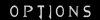
<style>
.page{position:relative;width:100px;height:20px;background:#000000}
.page>*{position:absolute;margin:0}
.t1{font:17.8px "RWBY_Style";letter-spacing:0.24em;color:#d4d4d4;scale:1.08 1}
</style>
<div class="page">
<p class="t1" style="left:10px;top:5px;width:81px;height:15px">options</p>
</div>
